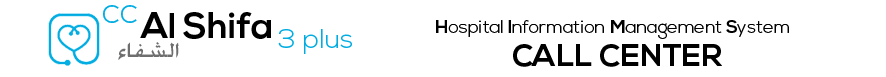
<style>
.page{position:relative;width:886px;height:77px;background:#ffffff}
.page>*{position:absolute;margin:0}
.t1{font:36px "NexaLight";color:#00ace1}
.t2{font:36px "NexaBold";color:#000000}
.t3{font:27px "NexaLight";color:#00ace1}
.t4{font:18px "NexaLight";color:#000000}
.t5{font:18px "NexaBold";color:#000000}
.t6{font:27px "NexaLight";color:#6e6e6e}
.t7{font:31.1px "NexaBold";color:#000000}
</style>
<div class="page">
<p class="t1" style="left:103px;top:5px;width:34px;height:18px">cc</p>
<p class="t2" style="left:140px;top:12px;width:131px;height:27px">Al Shifa</p>
<p class="t3" style="left:278px;top:29px;width:74px;height:25px">3 plus</p>
<p class="t4" style="left:436px;top:20px;width:353px;height:19px"><span class="t5">H</span>ospital<span class="t5"> I</span>nformation <span class="t5">M</span>anagement<span class="t5"> S</span>ystem</p>
<p class="t6" style="left:118px;top:42px;width:61px;height:18px">الشفاء</p>
<p class="t7" style="left:513px;top:44px;width:209px;height:23px">CALL CENTER</p>
</div>
